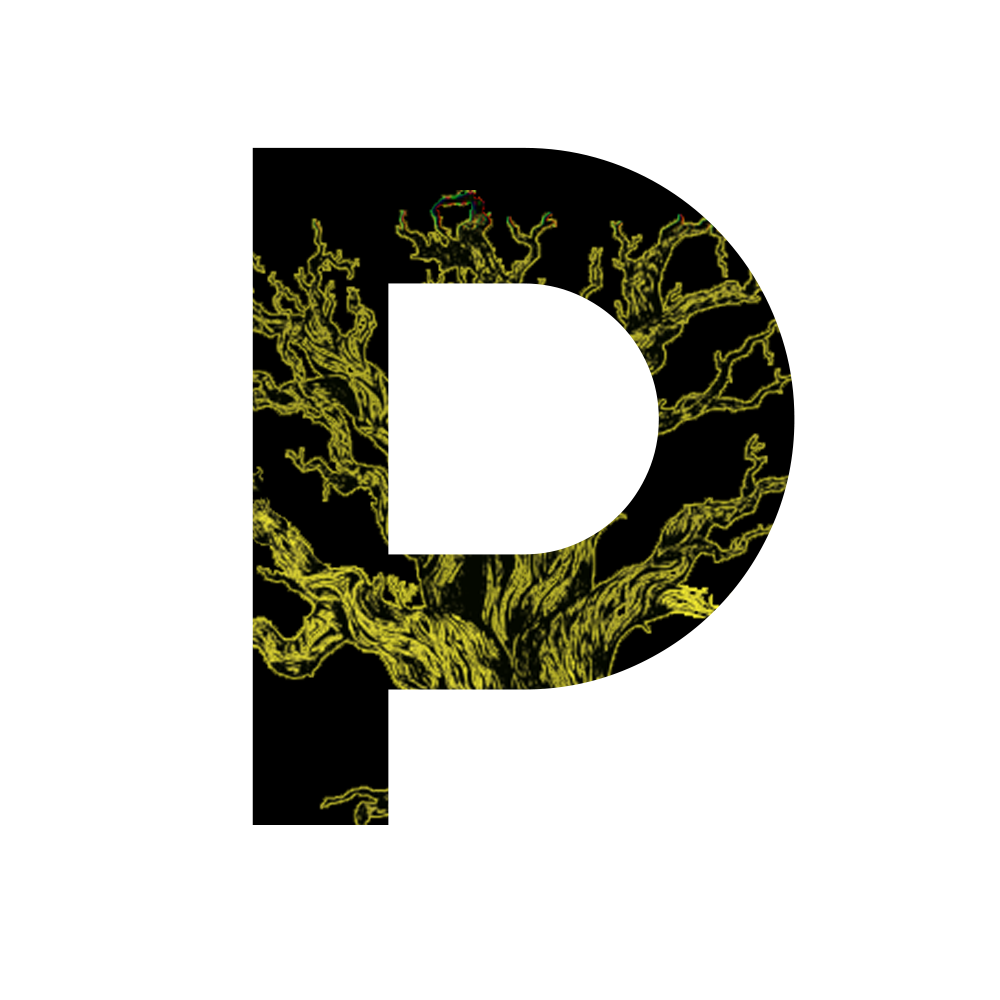
<style>
.page{position:relative;width:1000px;height:1000px;background:#ffffff}
.page>*{position:absolute;margin:0}
.t1{font:966.7px "Righteous-Regular";letter-spacing:0.06em;color:#000000}
</style>
<div class="page">
<p class="t1" style="left:252px;top:147px;width:543px;height:678px">P</p>
</div>
